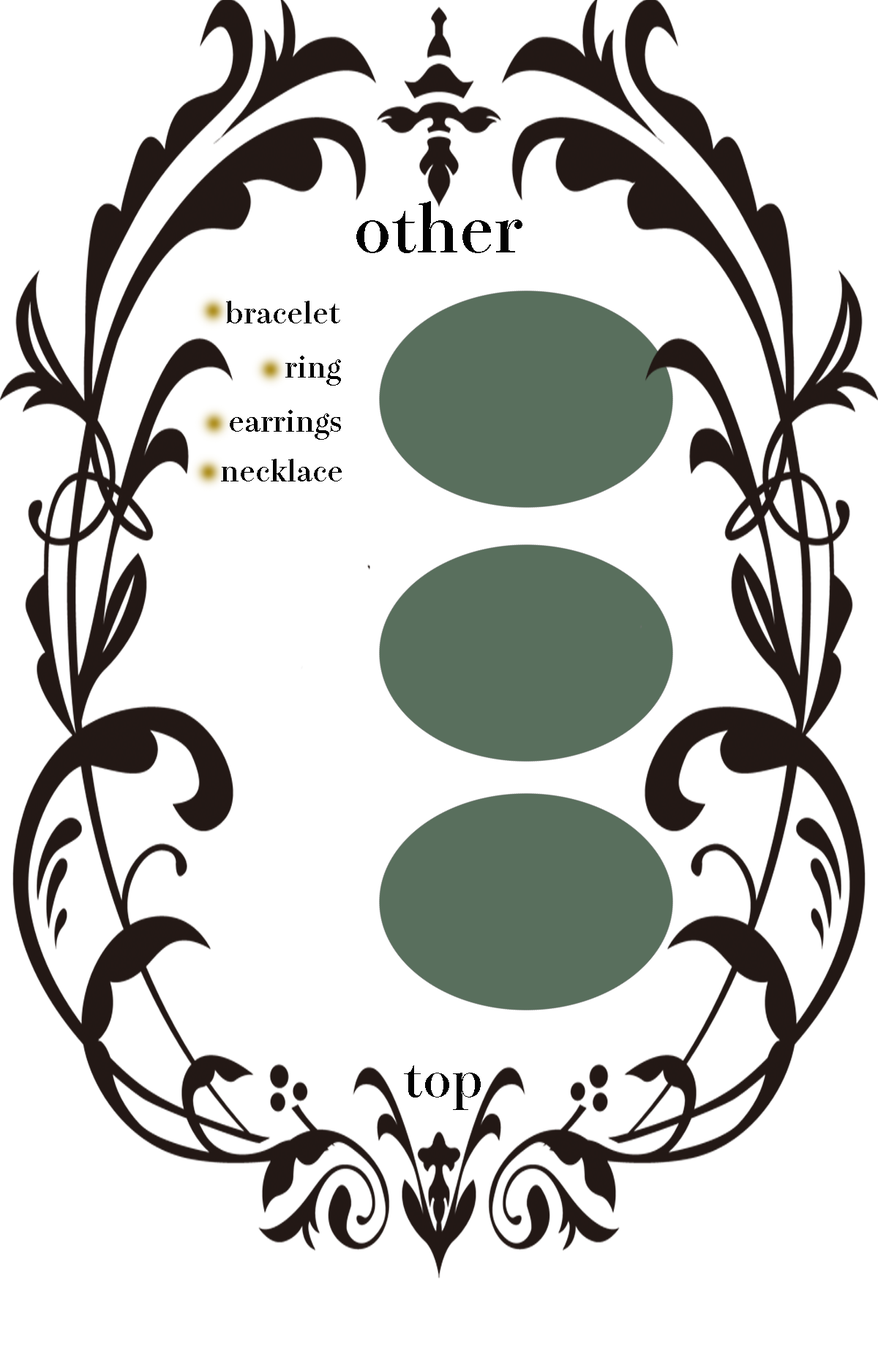
<style>
.page{position:relative;width:878px;height:1358px;background:#ffffff}
.page>*{position:absolute;margin:0}
.t1{font:61px "ToppanBunkyuMidashiMinchoStdN-ExtraBold";color:#020202}
.t2{font:27.4px "ToppanBunkyuMidashiMinchoStdN-ExtraBold";color:#020202}
.t3{font:45.7px "ToppanBunkyuMidashiMinchoStdN-ExtraBold";color:#020202}
</style>
<div class="page">
<p class="t1" style="left:356px;top:201px;width:166px;height:52px">other</p>
<p class="t2" style="left:226px;top:301px;width:114px;height:22px">bracelet</p>
<p class="t2" style="left:285px;top:356px;width:56px;height:30px">ring</p>
<p class="t2" style="left:230px;top:410px;width:111px;height:30px">earrings</p>
<p class="t2" style="left:221px;top:459px;width:121px;height:22px">necklace</p>
<p class="t3" style="left:404px;top:1065px;width:77px;height:45px">top</p>
</div>
